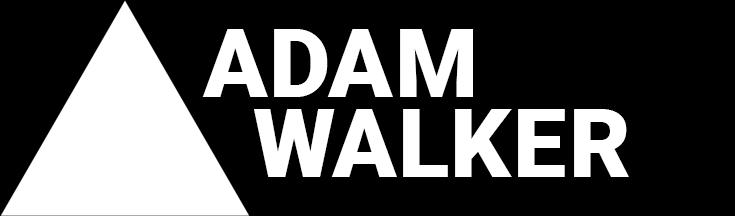
<style>
.page{position:relative;width:735px;height:216px;background:#000000}
.page>*{position:absolute;margin:0}
.t1{font:94.7px "Roboto-Black";letter-spacing:0.015em;color:#ffffff;text-transform:uppercase}
</style>
<div class="page">
<p class="t1" style="left:202px;top:29px;width:271px;height:68px">Adam</p>
<p class="t1" style="left:254px;top:109px;width:375px;height:68px">Walker</p>
</div>
